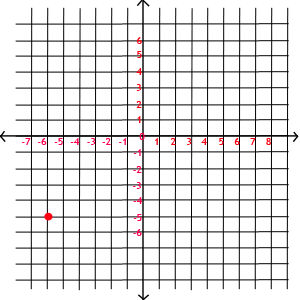
<style>
.page{position:relative;width:300px;height:300px;background:#ffffff}
.page>*{position:absolute;margin:0}
.t1{font:10px "TrebuchetMS";color:#fb0012}
.t2{font:10px "TrebuchetMS";color:#ff004e}
.t3{font:10px "TrebuchetMS"}
</style>
<div class="page">
<p class="t1" style="left:137px;top:37px;width:5px;height:7px">6</p>
<p class="t1" style="left:137px;top:51px;width:5px;height:7px">5</p>
<p class="t1" style="left:136px;top:68px;width:6px;height:7px">4</p>
<p class="t1" style="left:136px;top:84px;width:5px;height:7px">3</p>
<p class="t1" style="left:136px;top:101px;width:6px;height:7px">2</p>
<p class="t1" style="left:137px;top:116px;width:4px;height:7px">1</p>
<p class="t2" style="left:139px;top:133px;width:6px;height:7px">0</p>
<p class="t2" style="left:22px;top:138px;width:9px;height:7px">-7</p>
<p class="t2" style="left:38px;top:138px;width:9px;height:7px">-6</p>
<p class="t2" style="left:54px;top:138px;width:9px;height:7px">-5</p>
<p class="t2" style="left:70px;top:138px;width:10px;height:7px">-4</p>
<p class="t2" style="left:87px;top:138px;width:9px;height:7px">-3</p>
<p class="t2" style="left:102px;top:138px;width:9px;height:7px">-2</p>
<p class="t2" style="left:119px;top:138px;width:7px;height:7px">-1</p>
<p class="t2" style="left:133px;top:149px;width:8px;height:7px">-1</p>
<p class="t3" style="left:155px;top:138px;width:3px;height:7px">1</p>
<p class="t1" style="left:171px;top:138px;width:5px;height:7px">2</p>
<p class="t1" style="left:187px;top:138px;width:5px;height:7px">3</p>
<p class="t1" style="left:201px;top:138px;width:6px;height:7px">4</p>
<p class="t1" style="left:219px;top:138px;width:5px;height:7px">5</p>
<p class="t1" style="left:234px;top:138px;width:6px;height:7px">6</p>
<p class="t1" style="left:250px;top:138px;width:6px;height:7px">7</p>
<p class="t1" style="left:266px;top:138px;width:5px;height:7px">8</p>
<p class="t2" style="left:133px;top:166px;width:9px;height:7px">-2</p>
<p class="t2" style="left:133px;top:182px;width:8px;height:7px">-3</p>
<p class="t2" style="left:133px;top:197px;width:9px;height:7px">-4</p>
<p class="t2" style="left:133px;top:214px;width:9px;height:7px">-5</p>
<p class="t2" style="left:133px;top:229px;width:9px;height:7px">-6</p>
</div>
